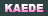
<style>
.page{position:relative;width:48px;height:16px;background:#314242}
.page>*{position:absolute;margin:0}
.t1{font:10.6px "Arial-Black";scale:0.96 1}
</style>
<div class="page">
<p class="t1" style="left:5px;top:4px;width:39px;height:8px">KAEDE</p>
</div>
